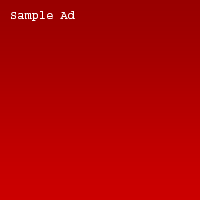
<style>
.page{position:relative;width:200px;height:200px}
.page>*{position:absolute;margin:0}
.t1{font:12px "Courier";color:#ffffff}
</style>
<div class="page">
<p class="t1" style="left:11px;top:11px;width:64px;height:10px">Sample Ad</p>
</div>
